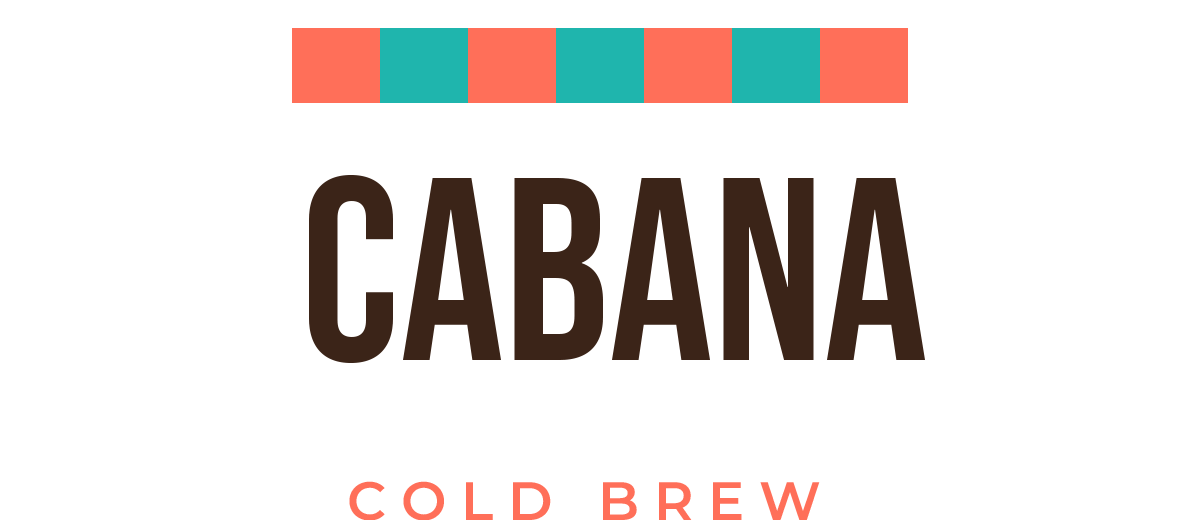
<style>
.page{position:relative;width:1200px;height:520px;background:#ffffff}
.page>*{position:absolute;margin:0}
.t1{font:260px "BebasNeue-Regular";color:#3b2418}
.t2{font:54px "Montserrat-SemiBold";color:#ff6f59}
</style>
<div class="page">
<p class="t1" style="left:309px;top:175px;width:616px;height:188px">CABANA</p>
<p class="t2" style="left:349px;top:481px;width:471px;height:40px">C O L D   B R E W</p>
</div>
